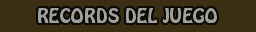
<style>
.page{position:relative;width:256px;height:32px;background:#3a2e13}
.page>*{position:absolute;margin:0}
.t1{font:18px "HoboStd";color:#a0a0a0}
</style>
<div class="page">
<p class="t1" style="left:38px;top:8px;width:179px;height:15px">RECORDS DEL JUEGO</p>
</div>
